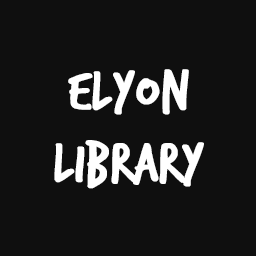
<style>
.page{position:relative;width:256px;height:256px;background:#0f0f0f}
.page>*{position:absolute;margin:0}
.t1{font:60px "TrashHand";color:#ffffff;font-weight:bold}
</style>
<div class="page">
<p class="t1" style="left:54px;top:69px;width:150px;height:120px;text-align:center">Elyon<br>Library</p>
</div>
